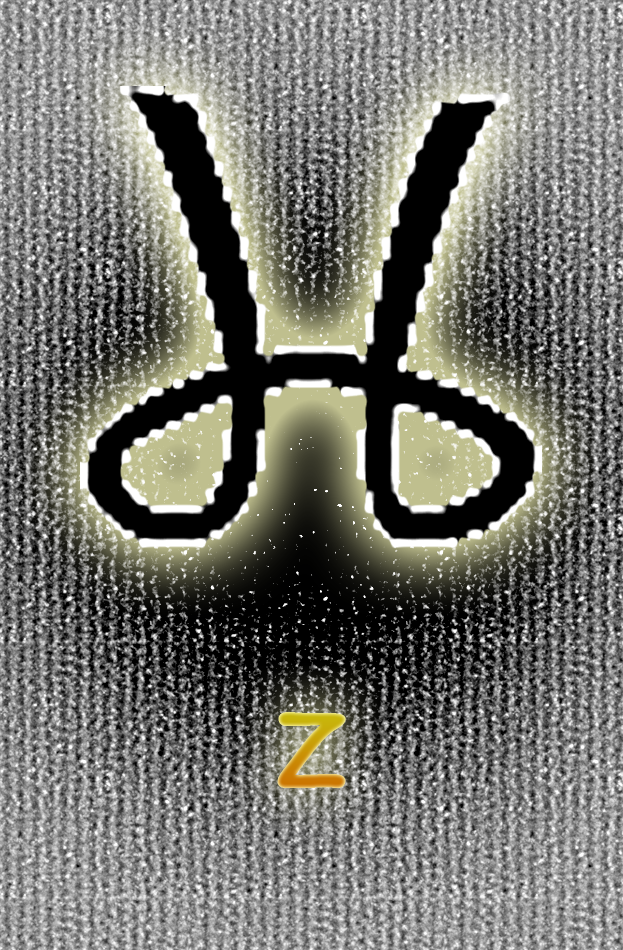
<style>
.page{position:relative;width:623px;height:950px}
.page>*{position:absolute;margin:0}
.t1{font:100px "ComicSansMS-Bold"}
</style>
<div class="page">
<p class="t1" style="left:277px;top:712px;width:69px;height:76px">Z</p>
</div>
